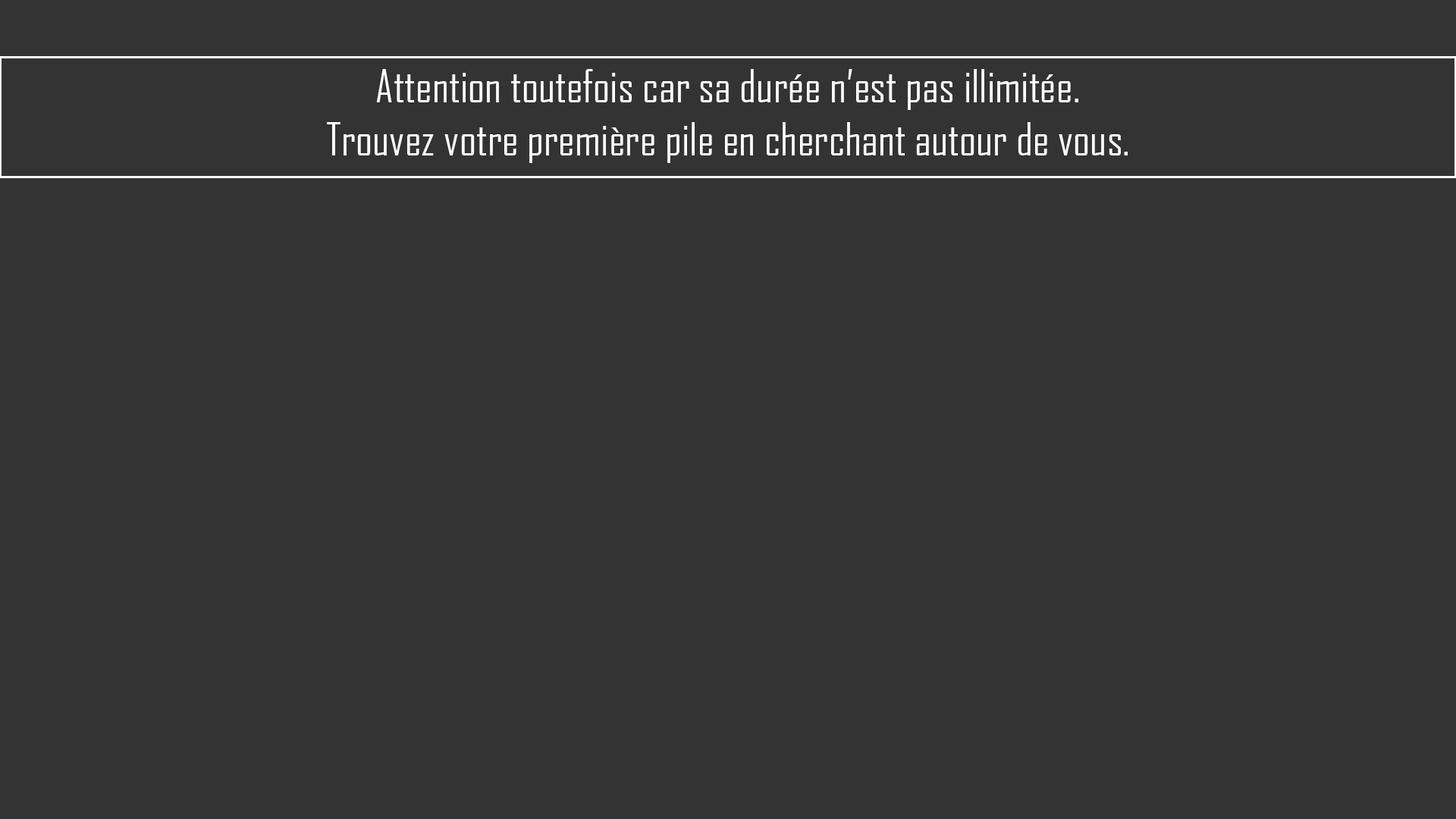
<style>
.page{position:relative;width:1456px;height:819px;background:#333333}
.page>*{position:absolute;margin:0}
.t1{font:44.2px "AgencyFB-Reg";color:#ffffff}
</style>
<div class="page">
<p class="t1" style="left:327px;top:69px;width:801px;height:94px;text-align:center">Attention toutefois car sa durée n’est pas illimitée.<br>Trouvez votre première pile en cherchant autour de vous.</p>
</div>
